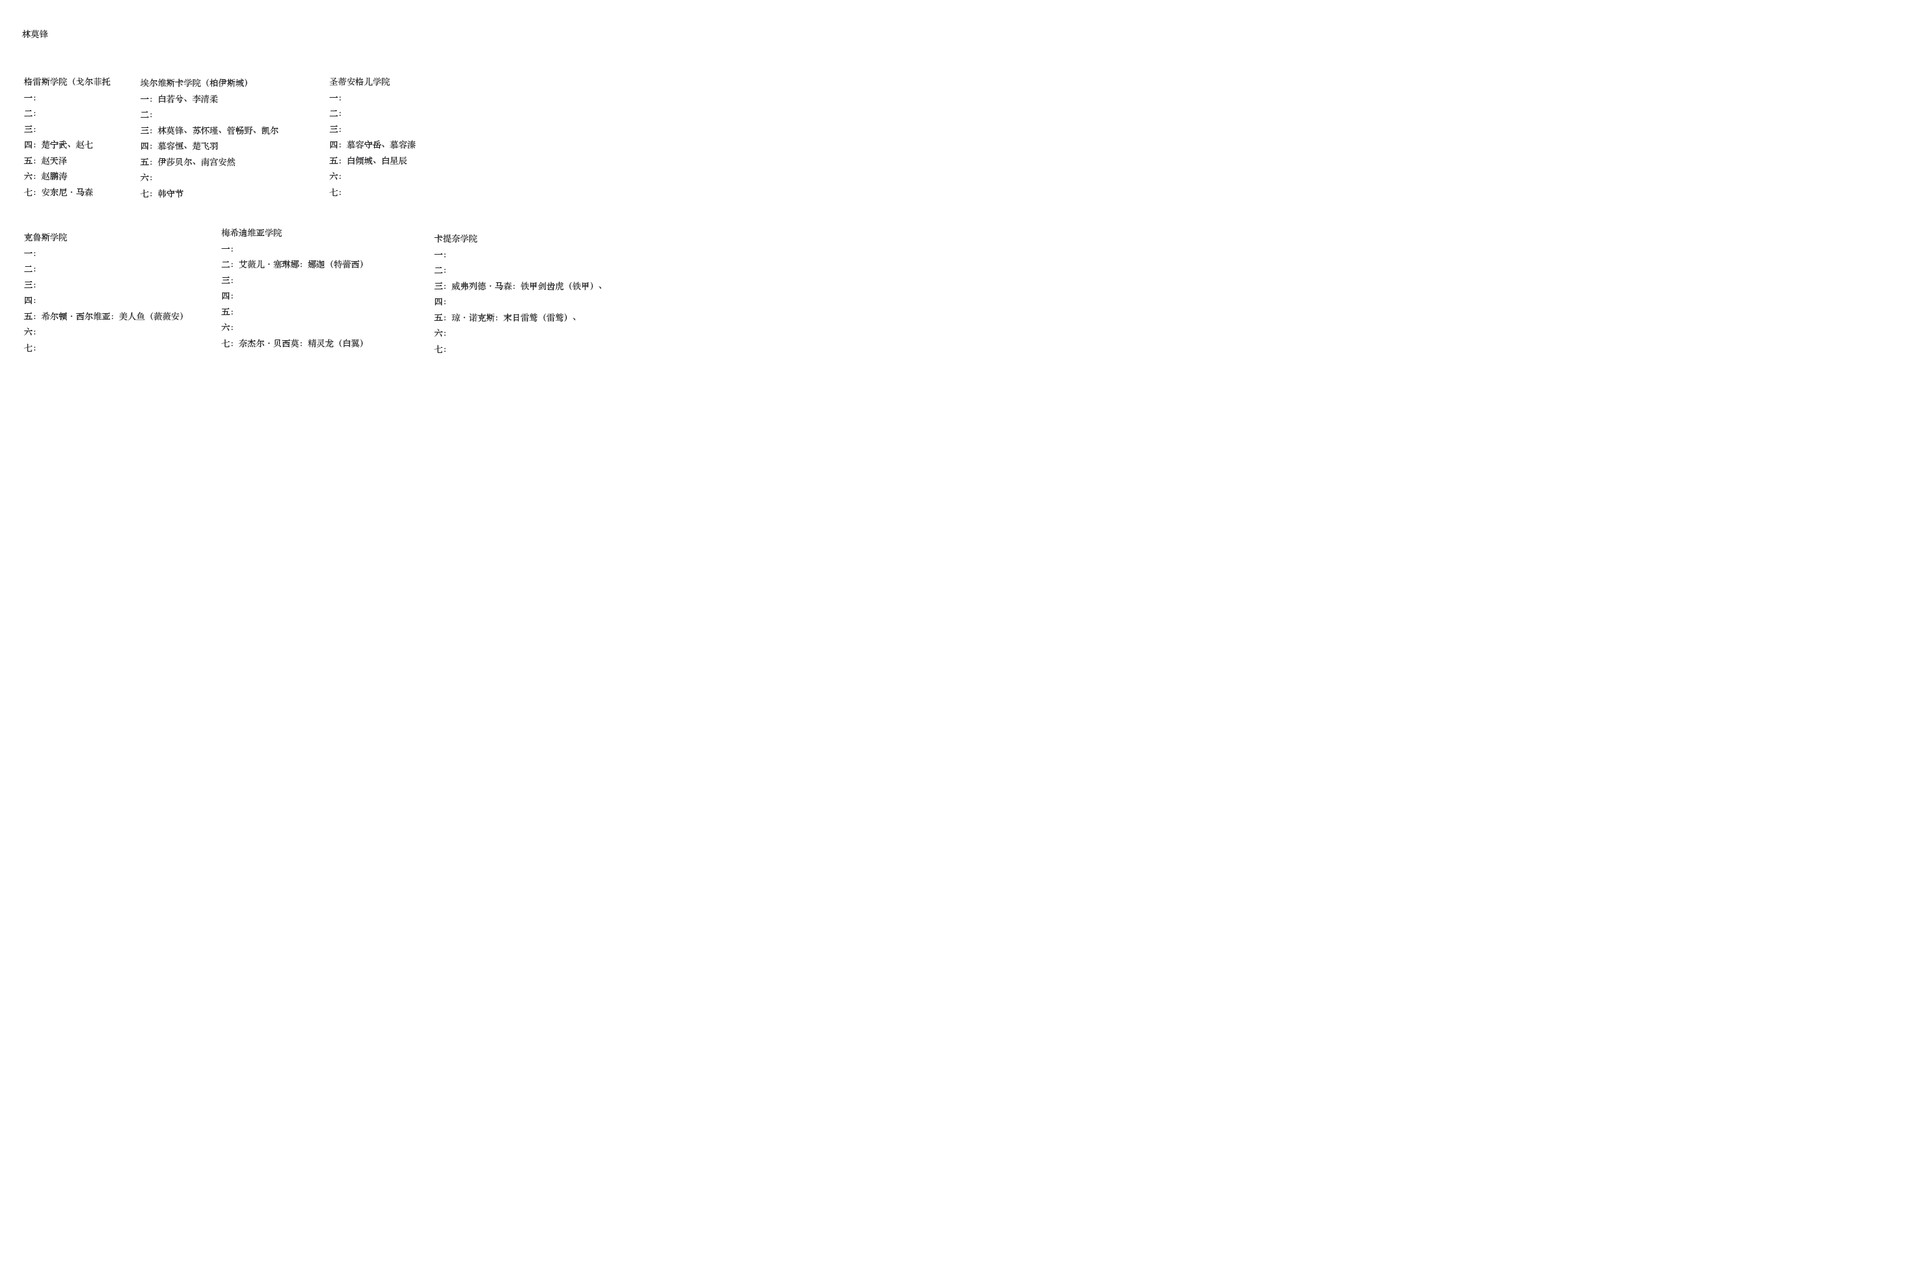
<style>
.page{position:relative;width:1929px;height:1286px;background:#ffffff}
.page>*{position:absolute;margin:0}
.t1{font:9px "STZhongsong";letter-spacing:-0.04em;color:#212024}
</style>
<div class="page">
<p class="t1" style="left:22px;top:30px;width:26px;height:9px">林莫锋</p>
<p class="t1" style="left:24px;top:77px;width:87px;height:120px">格雷斯学院（戈尔菲托<br>一：<br>二：<br>三：<br>四：楚宁武、赵七<br>五：赵天泽<br>六：赵鹏涛<br>七：安东尼·马森</p>
<p class="t1" style="left:329px;top:77px;width:87px;height:119px">圣蒂安格儿学院<br>一：<br>二：<br>三：<br>四：慕容守岳、慕容溱<br>五：白倾城、白星辰<br>六：<br>七：</p>
<p class="t1" style="left:140px;top:78px;width:138px;height:120px">埃尔维斯卡学院（柏伊斯城）<br>一：白若兮、李清柔<br>二：<br>三：林莫锋、苏怀瑾、管畅野、凯尔<br>四：慕容恒、楚飞羽<br>五：伊莎贝尔、南宫安然<br>六：<br>七：韩守节</p>
<p class="t1" style="left:24px;top:233px;width:159px;height:119px">克鲁斯学院<br>一：<br>二：<br>三：<br>四：<br>五：希尔顿·西尔维亚：美人鱼（薇薇安）<br>六：<br>七：</p>
<p class="t1" style="left:221px;top:228px;width:142px;height:120px">梅希迪维亚学院<br>一：<br>二：艾薇儿·塞琳娜：娜迦（特蕾西）<br>三：<br>四：<br>五：<br>六：<br>七：奈杰尔·贝西莫：精灵龙（白翼）</p>
<p class="t1" style="left:434px;top:234px;width:167px;height:119px">卡提奈学院<br>一：<br>二：<br>三：威弗列德·马森：铁甲剑齿虎（铁甲）、<br>四：<br>五：琼·诺克斯：末日雷鹫（雷鹫）、<br>六：<br>七：</p>
</div>
